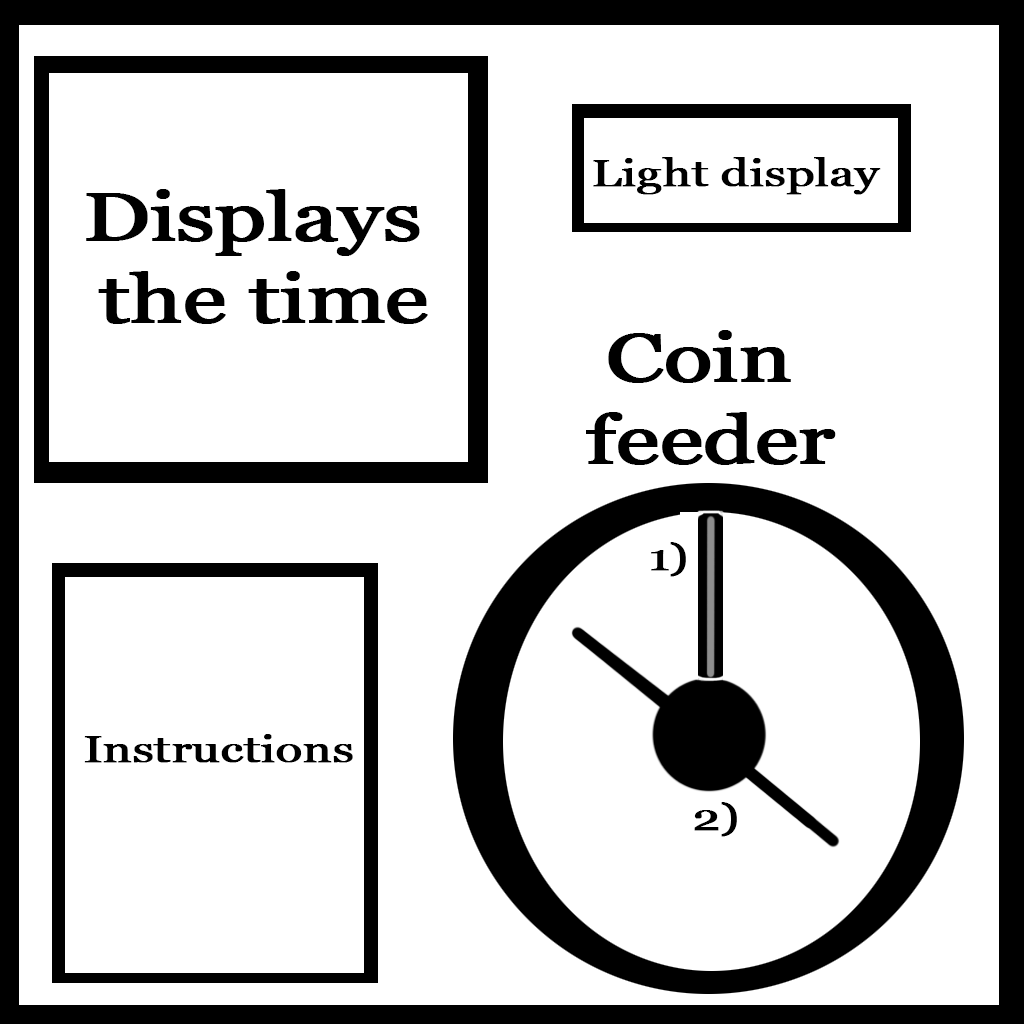
<style>
.page{position:relative;width:1024px;height:1024px;background:#ffffff}
.page>*{position:absolute;margin:0}
.t1{font:38px "Georgia";letter-spacing:-0.02em;color:#000000;font-weight:bold;scale:1.3 1}
.t2{font:68.4px/25px "Georgia";letter-spacing:-0.02em;color:#000000;font-weight:bold;scale:1.3 1}
.t3{font:68.4px/82px "Georgia";letter-spacing:-0.02em;color:#000000;font-weight:bold;scale:1.3 1}
</style>
<div class="page">
<p class="t1" style="left:593px;top:157px;width:288px;height:38px">Light display</p>
<p class="t2" style="left:86px;top:189px;width:342px;height:135px;text-align:center">Displays <br><span class="t3">the time</span></p>
<p class="t3" style="left:586px;top:330px;width:250px;height:135px;text-align:center">Coin <br>feeder</p>
<p class="t1" style="left:651px;top:542px;width:35px;height:35px">1)</p>
<p class="t1" style="left:84px;top:734px;width:269px;height:29px">Instructions</p>
<p class="t1" style="left:694px;top:802px;width:43px;height:35px">2)</p>
</div>
